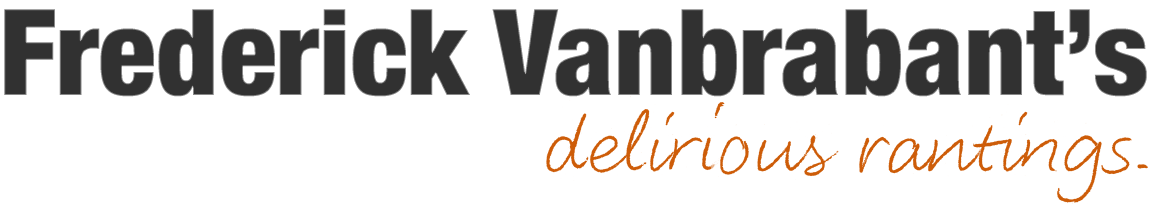
<style>
.page{position:relative;width:1156px;height:215px;background:#ffffff}
.page>*{position:absolute;margin:0}
.t1{font:120px "HelveticaNeue-CondensedBlack";color:#313131}
.t2{font:120px "LiebeHeide-Color";color:#cd5c08}
</style>
<div class="page">
<p class="t1" style="left:4px;top:9px;width:1143px;height:88px">Frederick Vanbrabant’s</p>
<p class="t2" style="left:546px;top:96px;width:602px;height:108px">delirious rantings.</p>
</div>
